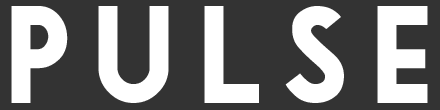
<style>
.page{position:relative;width:440px;height:110px;background:#333333}
.page>*{position:absolute;margin:0}
.t1{font:96.9px "LibbyHeavy";letter-spacing:0.18em;color:#ffffff}
.t2{font:96.9px "LibbyHeavy";letter-spacing:0.16em;color:#ffffff}
</style>
<div class="page">
<p class="t1" style="left:11px;top:6px;width:417px;height:97px"><span class="t2">p</span>u<span class="t2">L</span>SE</p>
</div>
